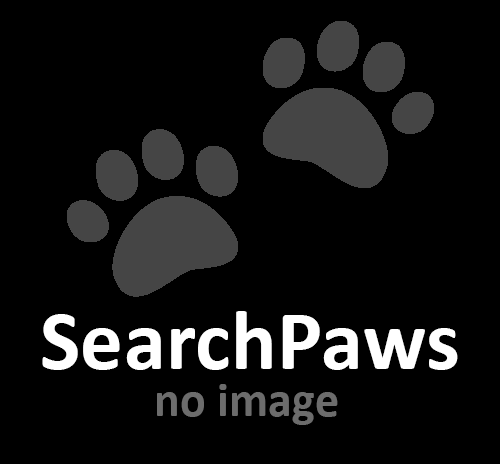
<style>
.page{position:relative;width:500px;height:464px;background:#000000}
.page>*{position:absolute;margin:0}
.t1{font:85px "Calibri-Bold";letter-spacing:0.005em;color:#ffffff}
.t2{font:48px "Calibri-Bold";letter-spacing:0.005em;color:#6c6c6c}
</style>
<div class="page">
<p class="t1" style="left:42px;top:311px;width:416px;height:59px">SearchPaws</p>
<p class="t2" style="left:157px;top:384px;width:181px;height:41px">no image</p>
</div>
